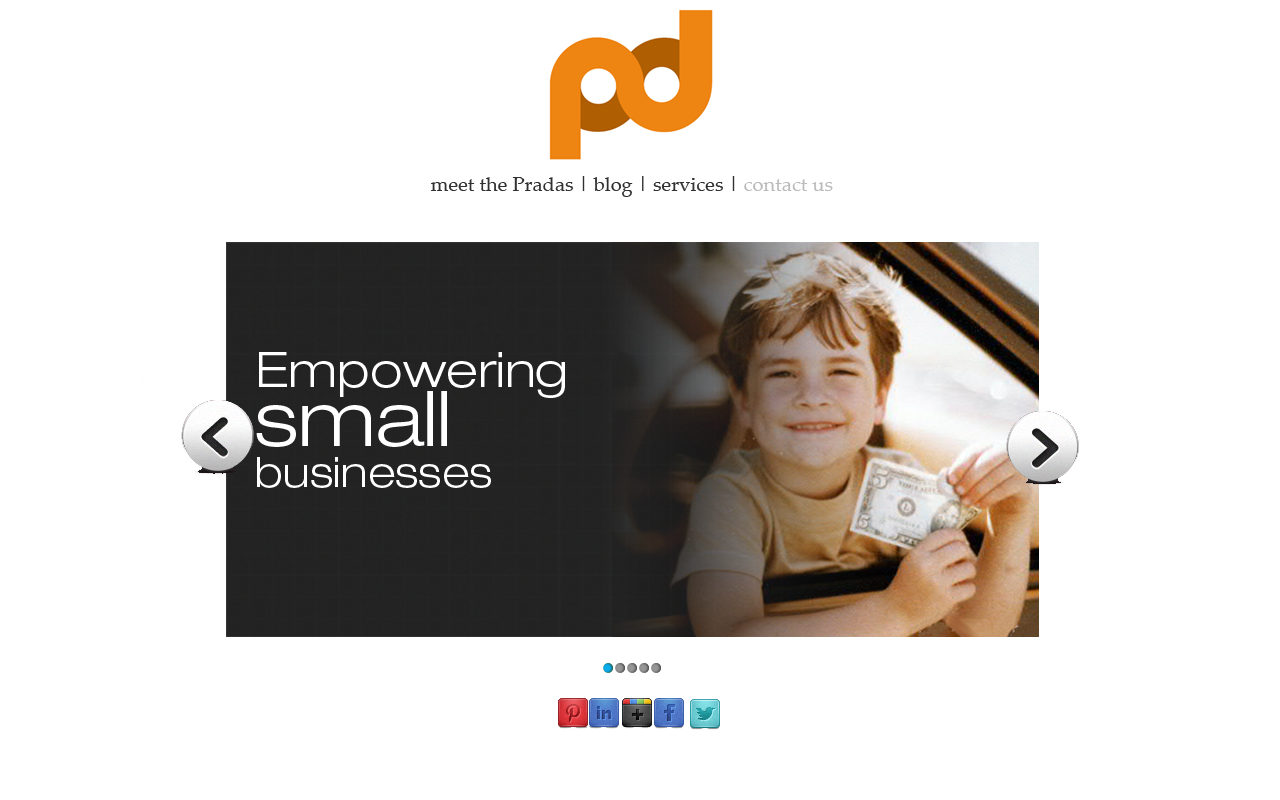
<style>
.page{position:relative;width:1280px;height:800px;background:#ffffff}
.page>*{position:absolute;margin:0}
.t1{font:20.1px "PalatinoLinotype-Roman";color:#313131}
.t2{font:20.1px "PalatinoLinotype-Roman";color:#bbbbbb}
.t3{font:48.8px/58.6px "HelveticaNeueLTPro-LtEx";color:#ffffff}
.t4{font:77.6px/58.6px "HelveticaNeueLTPro-LtEx";color:#ffffff}
.t5{font:42.2px/41px "HelveticaNeueLTPro-LtEx";color:#ffffff}
</style>
<div class="page">
<p class="t1" style="left:431px;top:176px;width:402px;height:21px">meet the Pradas | blog | services | <span class="t2">contact us</span></p>
<p class="t3" style="left:256px;top:352px;width:309px;height:136px">Empowering<br><span class="t4">small <br></span><span class="t5">businesses</span></p>
</div>
